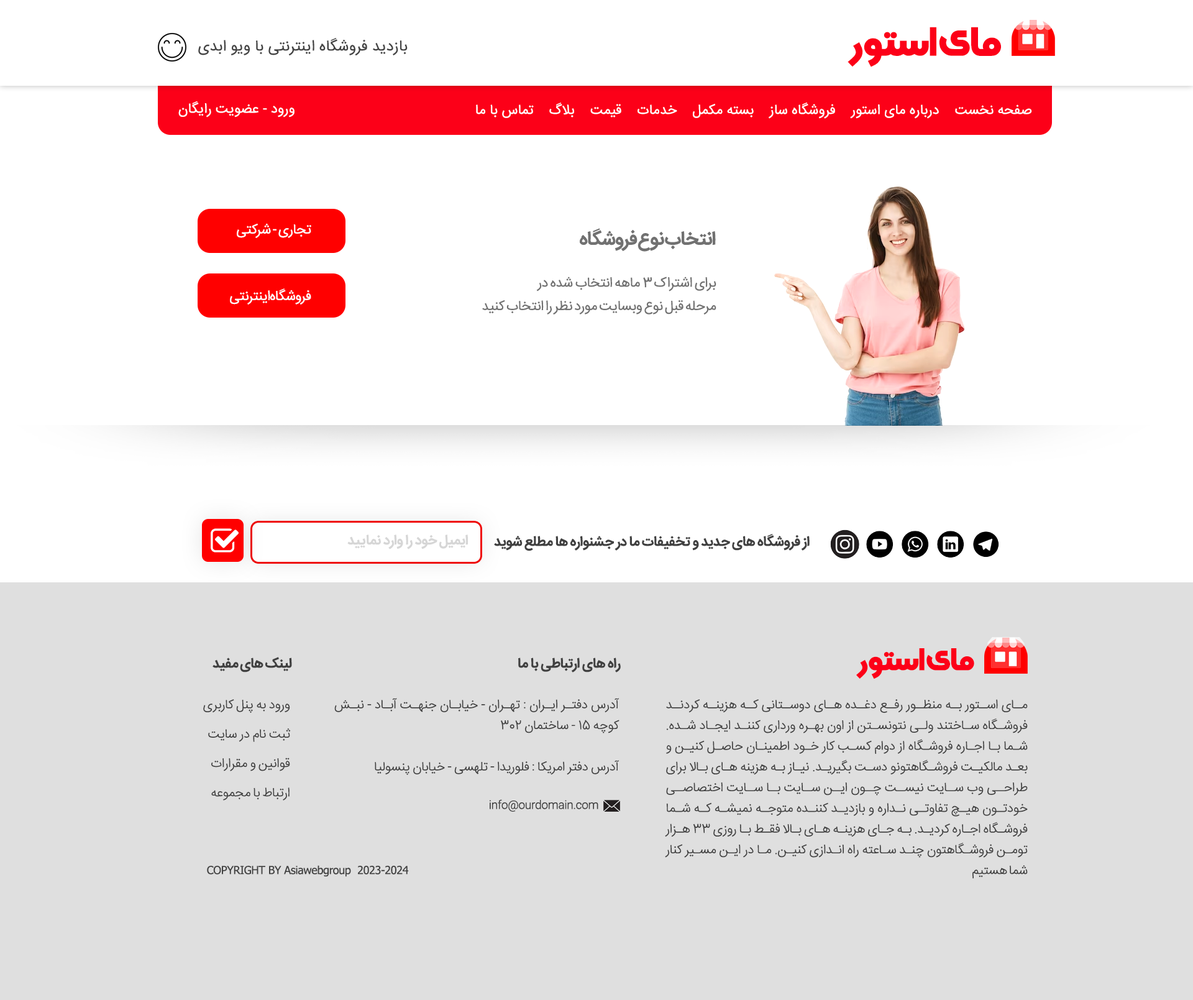
<style>
.page{position:relative;width:1193px;height:1000px;background:#ffffff}
.page>*{position:absolute;margin:0}
.t1{font:40.6px "SultanAdan";letter-spacing:-0.04em;color:#fc0018}
.t2{font:15.3px "IRANSansFaNum";color:#444444}
.t3{font:13.8px "IRANSansFaNum";color:#ffffff}
.t4{font:13.8px "IRANSansFaNum";letter-spacing:-0.04em;color:#ffffff}
.t5{font:19px "IRANSansFaNum-Bold";letter-spacing:-0.04em;color:#717171}
.t6{font:13.8px/23.3px "IRANSansFaNum";letter-spacing:-0.04em;color:#717171}
.t7{font:13.8px "IRANSansFaNum-Bold";letter-spacing:-0.02em;color:#404040}
.t8{font:13.8px "IRANSansFaNum-Bold";letter-spacing:-0.02em;color:#d6d6d6}
.t9{font:31.2px "SultanAdan";letter-spacing:-0.04em;color:#fc0018}
.t10{font:12.9px/29.3px "IRANSansFaNum-Light";letter-spacing:-0.02em;color:#404040}
.t11{font:12.9px/20.7px "IRANSansFaNum-Light";letter-spacing:-0.02em;color:#404040}
.t12{font:11.1px "IRANSansFaNum-Light";letter-spacing:-0.02em;color:#404040}
.t13{font:11.2px "Tahoma";letter-spacing:-0.02em;color:#404040}
</style>
<div class="page">
<p class="t1" style="left:847px;top:27px;width:154px;height:40px">مای استور</p>
<p class="t2" style="left:198px;top:38px;width:210px;height:18px">بازدید فروشگاه اینترنتی با ویو ابدی</p>
<p class="t3" style="left:178px;top:101px;width:116px;height:16px">ورود - عضویت رایگان</p>
<p class="t3" style="left:476px;top:103px;width:556px;height:16px">صفحه نخست    درباره مای استور    فروشگاه ساز    بسته مکمل    خدمات    قیمت    بلاگ    تماس با ما</p>
<p class="t4" style="left:237px;top:223px;width:74px;height:15px">تجاری - شرکتی</p>
<p class="t5" style="left:580px;top:228px;width:136px;height:24px">انتخاب نوع فروشگاه</p>
<p class="t6" style="left:482px;top:276px;width:234px;height:38px;text-align:justify">برای اشتراک 3 ماهه انتخاب شده در<br>مرحله قبل نوع وبسایت مورد نظر را انتخاب کنید</p>
<p class="t4" style="left:230px;top:288px;width:81px;height:16px">فروشگاه اینترنتی</p>
<p class="t7" style="left:494px;top:534px;width:316px;height:17px">از فروشگاه های جدید و تخفیفات ما در جشنواره ها مطلع شوید</p>
<p class="t8" style="left:347px;top:534px;width:121px;height:15px">ایمیل خود را وارد نمایید</p>
<p class="t9" style="left:856px;top:648px;width:118px;height:31px">مای استور</p>
<p class="t7" style="left:212px;top:657px;width:80px;height:15px">لینک های مفید</p>
<p class="t7" style="left:518px;top:657px;width:103px;height:15px">راه های ارتباطی با ما</p>
<p class="t10" style="left:203px;top:699px;width:88px;height:101px;text-align:justify">ورود به پنل کاربری<br>ثبت نام در سایت<br>قوانین و مقرارات <br>ارتباط با مجموعه</p>
<p class="t11" style="left:334px;top:698px;width:285px;height:77px;text-align:justify">آدرس دفتر ایران : تهران - خیابان جنهت آباد - نبش کوچه 15 - ساختمان 302<br><br>آدرس دفتر امریکا : فلوریدا - تلهسی - خیابان پنسولیا</p>
<p class="t11" style="left:665px;top:699px;width:363px;height:179px;text-align:justify">مای استور به منظور رفع دغده های دوستانی که هزینه کردند فروشگاه ساختند ولی نتونستن از اون بهره ورداری کنند ایجاد شده. شما با اجاره فروشگاه از دوام کسب کار خود اطمینان حاصل کنین و بعد مالکیت فروشگاهتونو دست بگیرید. نیاز به هزینه های بالا برای طراحی وب سایت نیست چون این سایت با سایت اختصاصی خودتون هیچ تفاوتی نداره و بازدید کننده متوجه نمیشه که شما فروشگاه اجاره کردید. به جای هزینه های بالا فقط با روزی 33 هزار تومن فروشگاهتون چند ساعته راه اندازی کنین. ما در این مسیر کنار شما هستیم</p>
<p class="t12" style="left:490px;top:799px;width:108px;height:12px">info@ourdomain.com</p>
<p class="t13" style="left:207px;top:865px;width:202px;height:12px">COPYRIGHT BY Asiawebgroup  2023-2024</p>
</div>
